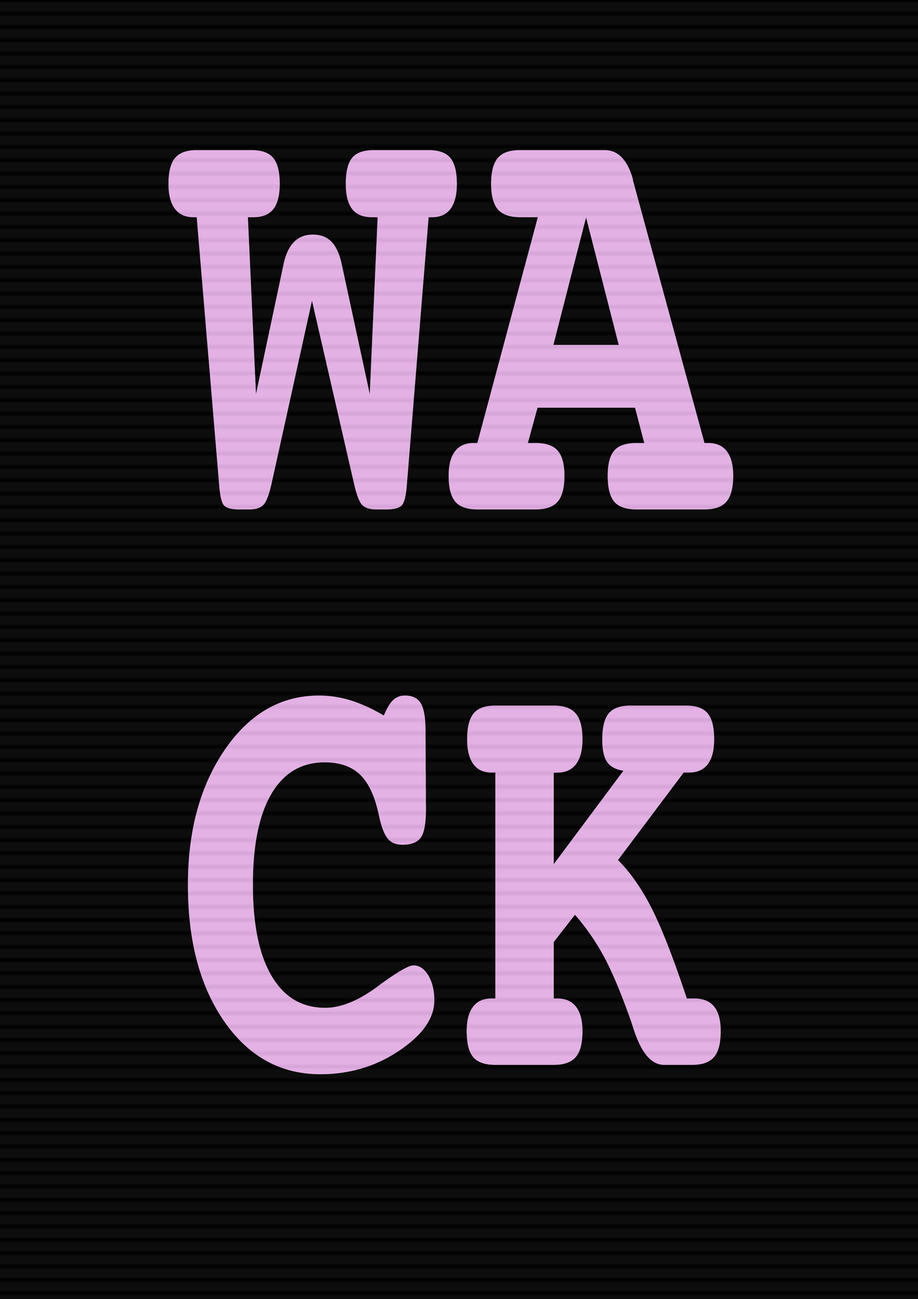
<style>
.page{position:relative;width:918px;height:1299px;background:#0d0d0d}
.page>*{position:absolute;margin:0}
.t1{font:620.1px "Courier-Bold";color:#e1ade3;text-transform:uppercase;scale:0.75 1}
</style>
<div class="page">
<p class="t1" style="left:168px;top:150px;width:565px;height:924px">wack</p>
</div>
